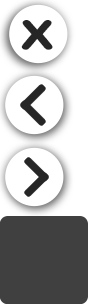
<style>
.page{position:relative;width:88px;height:304px;background:#ffffff}
.page>*{position:absolute;margin:0}
.t1{font:54.4px "ArialRoundedMTBold";color:#262626;scale:1.21 1}
</style>
<div class="page">
<p class="t1" style="left:21px;top:20px;width:32px;height:30px">x</p>
</div>
